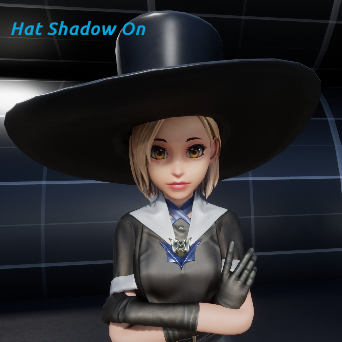
<style>
.page{position:relative;width:342px;height:342px}
.page>*{position:absolute;margin:0}
.t1{font:17.9px "Ubuntu-Italic";letter-spacing:0.03em;color:#03a7dd;font-weight:bold}
</style>
<div class="page">
<p class="t1" style="left:11px;top:21px;width:135px;height:14px">Hat Shadow On</p>
</div>
